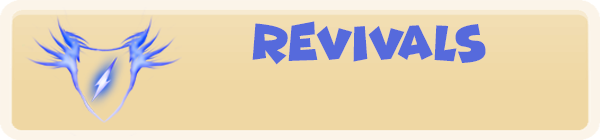
<style>
.page{position:relative;width:600px;height:140px;background:#efd7a3}
.page>*{position:absolute;margin:0}
.t1{font:50px "Funhouse";color:#566adc}
</style>
<div class="page">
<p class="t1" style="left:252px;top:21px;width:234px;height:44px">revivals</p>
</div>
